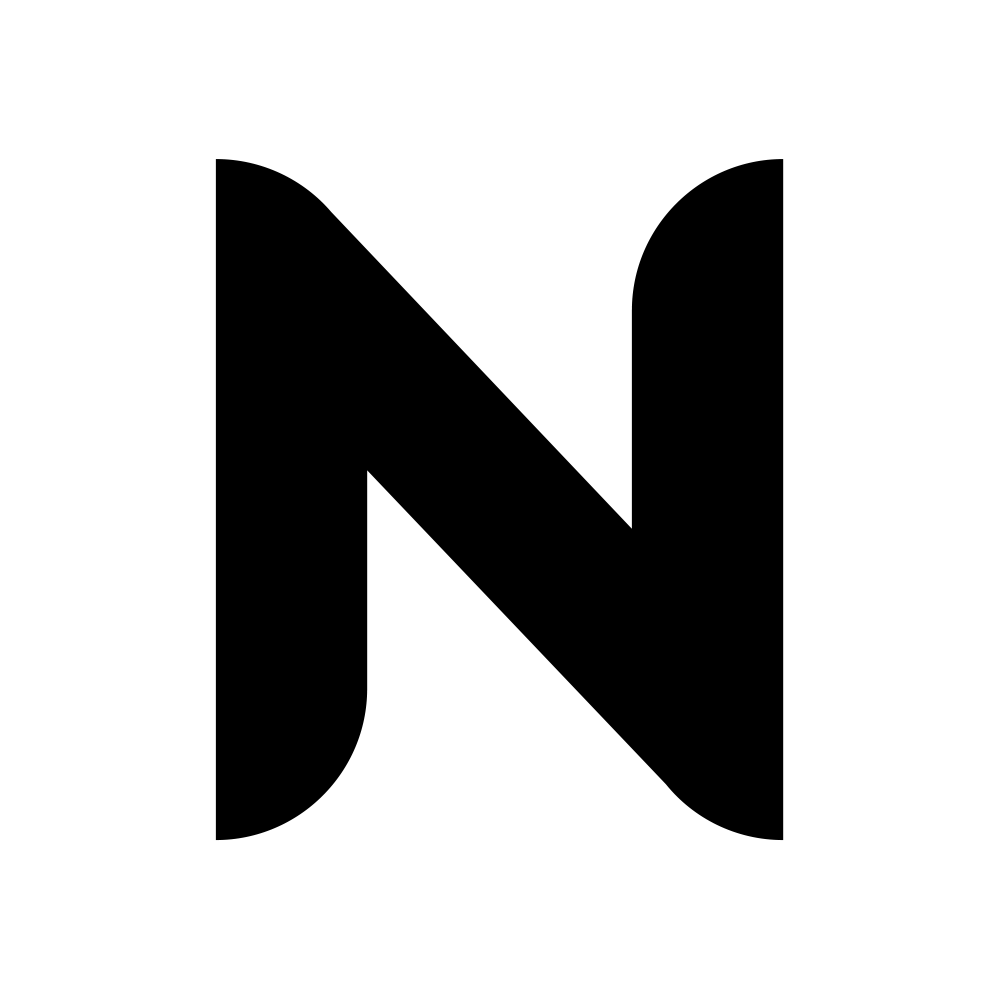
<style>
.page{position:relative;width:1000px;height:1000px;background:#ffffff}
.page>*{position:absolute;margin:0}
.t1{font:945.7px "MagmawaveCaps-Bold";color:#000000}
</style>
<div class="page">
<p class="t1" style="left:215px;top:159px;width:569px;height:682px">N</p>
</div>
